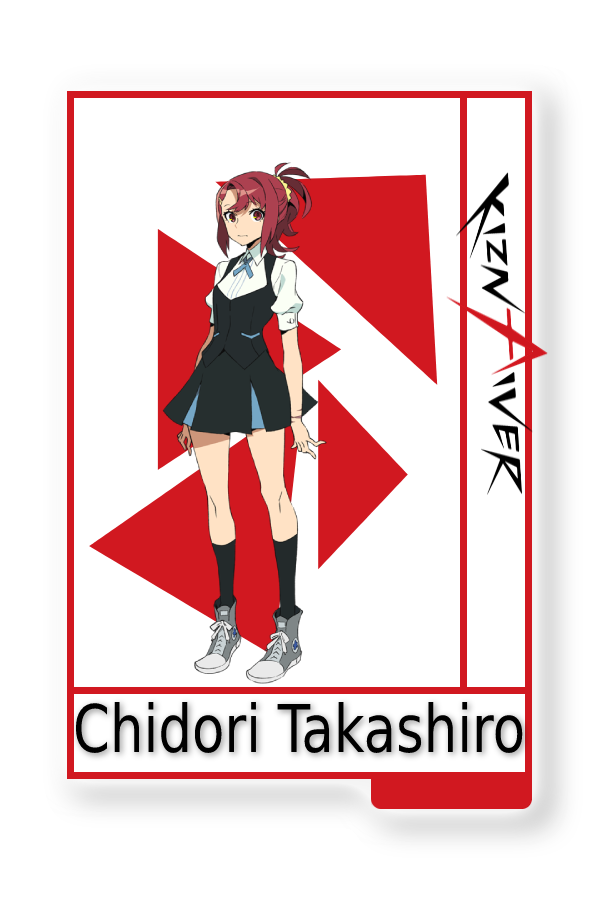
<style>
.page{position:relative;width:600px;height:900px;background:#ffffff}
.page>*{position:absolute;margin:0}
.t1{font:65.8px "CoolveticaRg-Regular";color:#000000;scale:0.81 1}
</style>
<div class="page">
<p class="t1" style="left:76px;top:702px;width:447px;height:51px">Chidori Takashiro</p>
</div>
